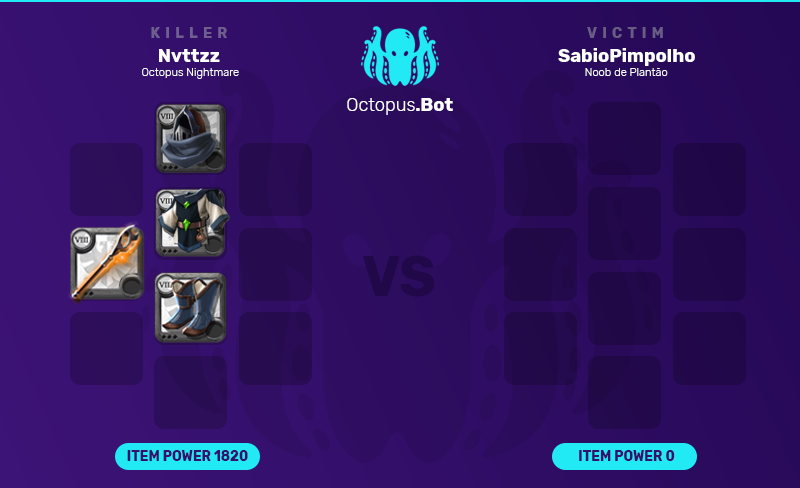
<style>
.page{position:relative;width:800px;height:488px}
.page>*{position:absolute;margin:0}
.t1{font:14.4px "Rubik-Bold";letter-spacing:0.36em;color:#6e5f90;text-transform:uppercase}
.t2{font:14.4px "Rubik-Bold";letter-spacing:0.36em;color:#695d85;text-transform:uppercase}
.t3{font:18.4px "Rubik-Bold";color:#ffffff}
.t4{font:11.1px "Rubik-Light";color:#ffffff}
.t5{font:18.4px "Rubik-Light";color:#ffffff}
.t6{font:55.4px "Rubik-Bold";color:#210849;text-transform:uppercase}
.t7{font:13.6px "Rubik-Bold";color:#36106d;text-transform:uppercase}
</style>
<div class="page">
<p class="t1" style="left:151px;top:27px;width:76px;height:11px">killer</p>
<p class="t2" style="left:587px;top:27px;width:76px;height:11px">Victim</p>
<p class="t3" style="left:159px;top:49px;width:61px;height:13px">Nvttzz</p>
<p class="t3" style="left:558px;top:48px;width:137px;height:18px">SabioPimpolho</p>
<p class="t4" style="left:142px;top:68px;width:97px;height:11px">Octopus Nightmare</p>
<p class="t4" style="left:585px;top:68px;width:83px;height:8px">Noob de Plantão</p>
<p class="t5" style="left:347px;top:98px;width:106px;height:17px">Octopus<span class="t3">.Bot</span></p>
<p class="t6" style="left:363px;top:255px;width:72px;height:42px">VS</p>
<p class="t7" style="left:127px;top:450px;width:121px;height:11px">Item Power 1820</p>
<p class="t7" style="left:579px;top:450px;width:96px;height:11px">Item Power 0</p>
</div>
